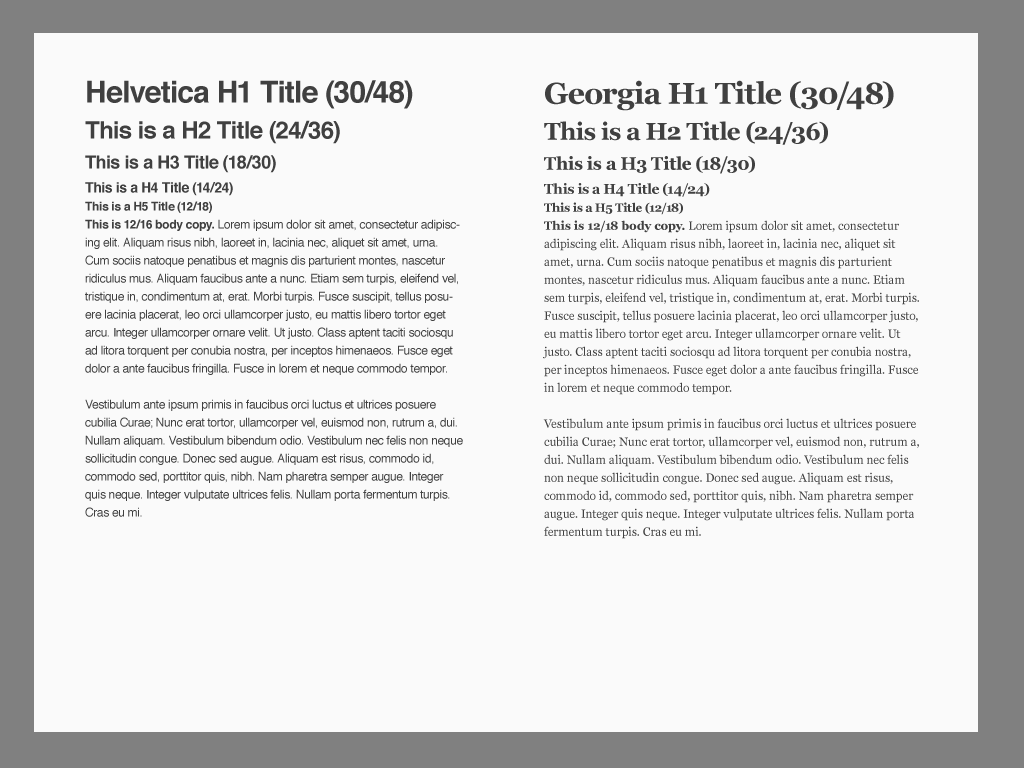
<style>
.page{position:relative;width:1024px;height:768px;background:#fafafa}
.page>*{position:absolute;margin:0}
.t1{font:12px/18px "Helvetica";letter-spacing:-0.025em;color:#404040}
.t2{font:30px/48px "Helvetica-Bold";letter-spacing:-0.025em;color:#404040}
.t3{font:24px/36px "Helvetica-Bold";letter-spacing:-0.025em;color:#404040}
.t4{font:18px/30px "Helvetica-Bold";letter-spacing:-0.025em;color:#404040}
.t5{font:14px/24px "Helvetica-Bold";letter-spacing:-0.025em;color:#404040}
.t6{font:12px/18px "Helvetica-Bold";letter-spacing:-0.025em;color:#404040}
.t7{font:12px/18px "Georgia";letter-spacing:-0.005em;color:#404040}
.t8{font:30px/48px "Georgia";letter-spacing:-0.025em;color:#404040}
.t9{font:30px/48px "Georgia-Bold";letter-spacing:-0.025em;color:#404040}
.t10{font:24px/36px "Georgia-Bold";letter-spacing:-0.025em;color:#404040}
.t11{font:18px/30px "Georgia-Bold";letter-spacing:-0.025em;color:#404040}
.t12{font:14px/24px "Georgia-Bold";letter-spacing:-0.025em;color:#404040}
.t13{font:12px/18px "Georgia-Bold";letter-spacing:-0.025em;color:#404040}
.t14{font:12px/18px "Georgia-Bold";letter-spacing:-0.005em;color:#404040}
</style>
<div class="page">
<p class="t1" style="left:85px;top:80px;width:378px;height:437px"><span class="t2"><br>Helvetica H1 Title (30/48)<br></span><span class="t3">This is a H2 Title (24/36)<br></span><span class="t4">This is a H3 Title (18/30)<br></span><span class="t5">This is a H4 Title (14/24)<br></span><span class="t6">This is a H5 Title (12/18)<br>This is 12/16 body copy.</span> Lorem ipsum dolor sit amet, consectetur adipiscing elit. Aliquam risus nibh, laoreet in, lacinia nec, aliquet sit amet, urna. Cum sociis natoque penatibus et magnis dis parturient montes, nascetur ridiculus mus. Aliquam faucibus ante a nunc. Etiam sem turpis, eleifend vel, tristique in, condimentum at, erat. Morbi turpis. Fusce suscipit, tellus posuere lacinia placerat, leo orci ullamcorper justo, eu mattis libero tortor eget arcu. Integer ullamcorper ornare velit. Ut justo. Class aptent taciti sociosqu ad litora torquent per conubia nostra, per inceptos himenaeos. Fusce eget dolor a ante faucibus fringilla. Fusce in lorem et neque commodo tempor.<br><br>Vestibulum ante ipsum primis in faucibus orci luctus et ultrices posuere cubilia Curae; Nunc erat tortor, ullamcorper vel, euismod non, rutrum a, dui. Nullam aliquam. Vestibulum bibendum odio. Vestibulum nec felis non neque sollicitudin congue. Donec sed augue. Aliquam est risus, commodo id, commodo sed, porttitor quis, nibh. Nam pharetra semper augue. Integer quis neque. Integer vulputate ultrices felis. Nullam porta fermentum turpis. Cras eu mi.</p>
<p class="t7" style="left:543px;top:80px;width:376px;height:459px"><span class="t8"><br></span><span class="t9">Georgia H1 Title (30/48)<br></span><span class="t10">This is a H2 Title (24/36)<br></span><span class="t11">This is a H3 Title (18/30)<br></span><span class="t12">This is a H4 Title (14/24)<br></span><span class="t13">This is a H5 Title (12/18)<br></span><span class="t14">This is 12/18 body copy.</span> Lorem ipsum dolor sit amet, consectetur adipiscing elit. Aliquam risus nibh, laoreet in, lacinia nec, aliquet sit amet, urna. Cum sociis natoque penatibus et magnis dis parturient montes, nascetur ridiculus mus. Aliquam faucibus ante a nunc. Etiam sem turpis, eleifend vel, tristique in, condimentum at, erat. Morbi turpis. Fusce suscipit, tellus posuere lacinia placerat, leo orci ullamcorper justo, eu mattis libero tortor eget arcu. Integer ullamcorper ornare velit. Ut justo. Class aptent taciti sociosqu ad litora torquent per conubia nostra, per inceptos himenaeos. Fusce eget dolor a ante faucibus fringilla. Fusce in lorem et neque commodo tempor.<br><br>Vestibulum ante ipsum primis in faucibus orci luctus et ultrices posuere cubilia Curae; Nunc erat tortor, ullamcorper vel, euismod non, rutrum a, dui. Nullam aliquam. Vestibulum bibendum odio. Vestibulum nec felis non neque sollicitudin congue. Donec sed augue. Aliquam est risus, commodo id, commodo sed, porttitor quis, nibh. Nam pharetra semper augue. Integer quis neque. Integer vulputate ultrices felis. Nullam porta fermentum turpis. Cras eu mi.</p>
</div>
